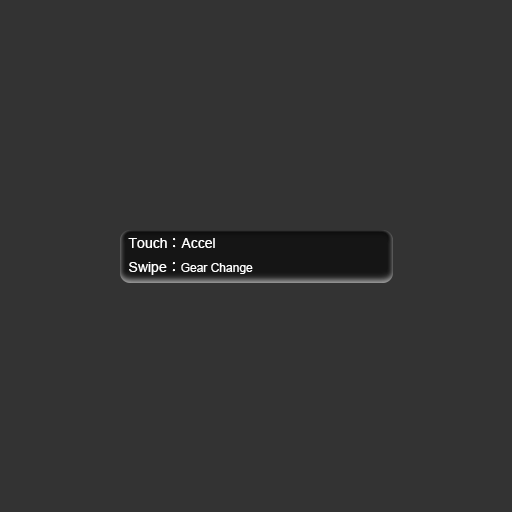
<style>
.page{position:relative;width:512px;height:512px;background:#333333}
.page>*{position:absolute;margin:0}
.t1{font:14px "ArialMT";color:#ffffff}
.t2{font:14px "KozGoPr6N-Regular";color:#ffffff}
.t3{font:12px "ArialMT";color:#ffffff}
</style>
<div class="page">
<p class="t1" style="left:128px;top:238px;width:125px;height:37px">Touch<span class="t2">：</span>Accel<br>Swipe<span class="t2">：</span><span class="t3">Gear Change</span></p>
</div>
